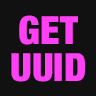
<style>
.page{position:relative;width:96px;height:96px;background:#111111}
.page>*{position:absolute;margin:0}
.t1{font:39px/37px "HelveticaNeue-CondensedBlack";color:#ff40f4}
</style>
<div class="page">
<p class="t1" style="left:11px;top:15px;width:74px;height:67px;text-align:center">GET<br>UUID</p>
</div>
